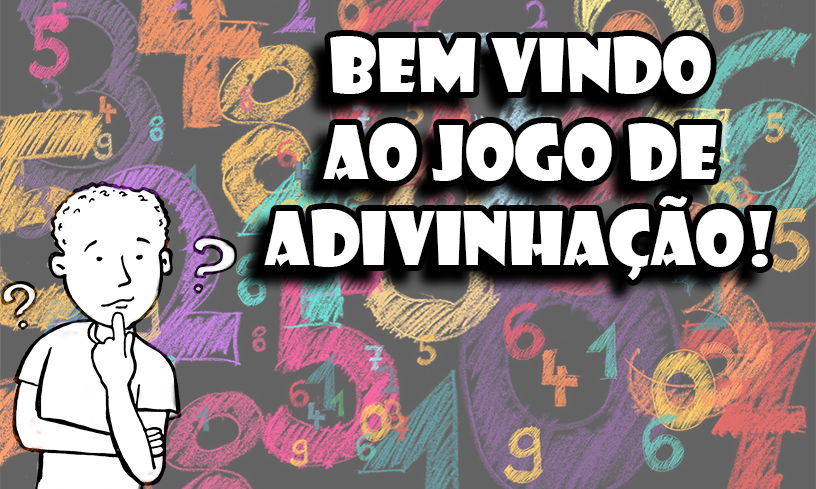
<style>
.page{position:relative;width:816px;height:489px}
.page>*{position:absolute;margin:0}
.t1{font:72px "ShowcardGothic-Reg";color:#ffffff}
</style>
<div class="page">
<p class="t1" style="left:264px;top:36px;width:508px;height:244px;text-align:center">Bem vindo<br>ao jogo de<br>Adivinhação!</p>
</div>
